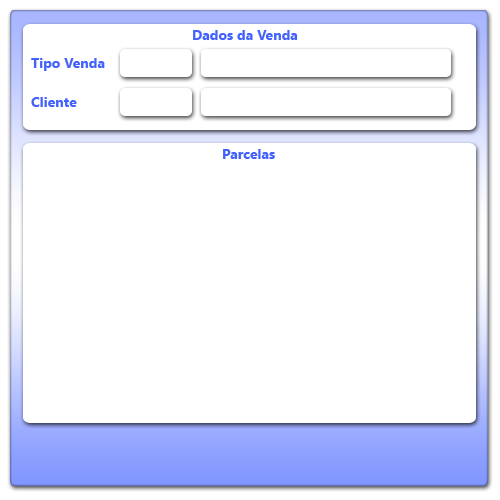
<style>
.page{position:relative;width:500px;height:500px;background:#ffffff}
.page>*{position:absolute;margin:0}
.t1{font:14px "SegoeUI-Bold";color:#4261ff}
</style>
<div class="page">
<p class="t1" style="left:193px;top:30px;width:105px;height:10px">Dados da Venda</p>
<p class="t1" style="left:31px;top:58px;width:74px;height:13px">Tipo Venda</p>
<p class="t1" style="left:31px;top:97px;width:46px;height:10px">Cliente</p>
<p class="t1" style="left:223px;top:149px;width:52px;height:10px">Parcelas</p>
</div>
